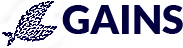
<style>
.page{position:relative;width:183px;height:48px;background:#ffffff}
.page>*{position:absolute;margin:0}
.t1{font:39.6px "Lato-Black";color:#03003f}
</style>
<div class="page">
<p class="t1" style="left:62px;top:5px;width:121px;height:29px">GAINS</p>
</div>
